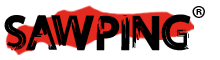
<style>
.page{position:relative;width:220px;height:60px;background:#ffffff}
.page>*{position:absolute;margin:0}
.t1{font:37.1px "MyriadPro-Regular";color:#000000}
.t2{font:52px "FOREVER7entindemo";color:#000000}
</style>
<div class="page">
<p class="t1" style="left:192px;top:6px;width:13px;height:12px">®</p>
<p class="t2" style="left:4px;top:14px;width:187px;height:37px">SAWPING</p>
</div>
